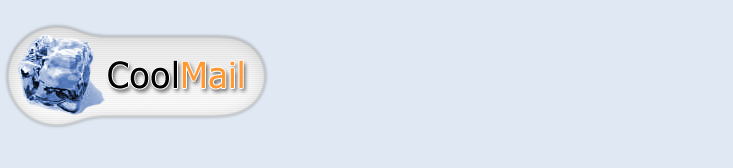
<style>
.page{position:relative;width:733px;height:168px;background:#e0e9f3}
.page>*{position:absolute;margin:0}
.t1{font:36px "Tahoma";letter-spacing:0.02em;color:#000000}
.t2{font:36px "Tahoma";letter-spacing:0.02em;color:#ff9933}
</style>
<div class="page">
<p class="t1" style="left:108px;top:60px;width:135px;height:29px">Cool<span class="t2">Mail</span></p>
</div>
